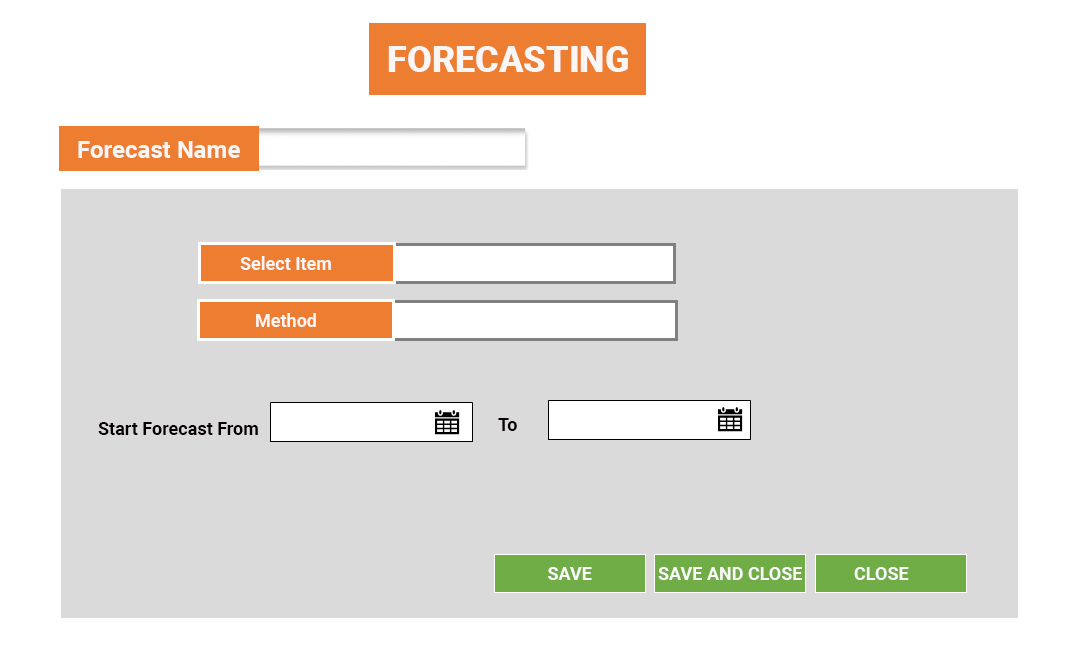
<style>
.page{position:relative;width:1080px;height:670px;background:#ffffff}
.page>*{position:absolute;margin:0}
.t1{font:36px "Roboto-Black";color:#fbf6f6}
.t2{font:24px "Roboto-Bold";color:#fbf6f6}
.t3{font:18px "Roboto-Bold";color:#fbf6f6}
.t4{font:18px "Roboto-Bold";color:#060000}
.t5{font:18px "Roboto-Bold";color:#fcfbfb}
</style>
<div class="page">
<p class="t1" style="left:388px;top:46px;width:240px;height:26px">FORECASTING</p>
<p class="t2" style="left:78px;top:141px;width:162px;height:17px">Forecast Name</p>
<p class="t3" style="left:240px;top:256px;width:91px;height:14px">Select Item</p>
<p class="t3" style="left:256px;top:313px;width:60px;height:14px">Method</p>
<p class="t4" style="left:98px;top:422px;width:160px;height:13px">Start Forecast From</p>
<p class="t4" style="left:498px;top:418px;width:19px;height:13px">To</p>
<p class="t5" style="left:548px;top:567px;width:44px;height:13px">SAVE</p>
<p class="t5" style="left:658px;top:567px;width:144px;height:13px">SAVE AND CLOSE</p>
<p class="t5" style="left:854px;top:567px;width:55px;height:13px">CLOSE</p>
</div>
